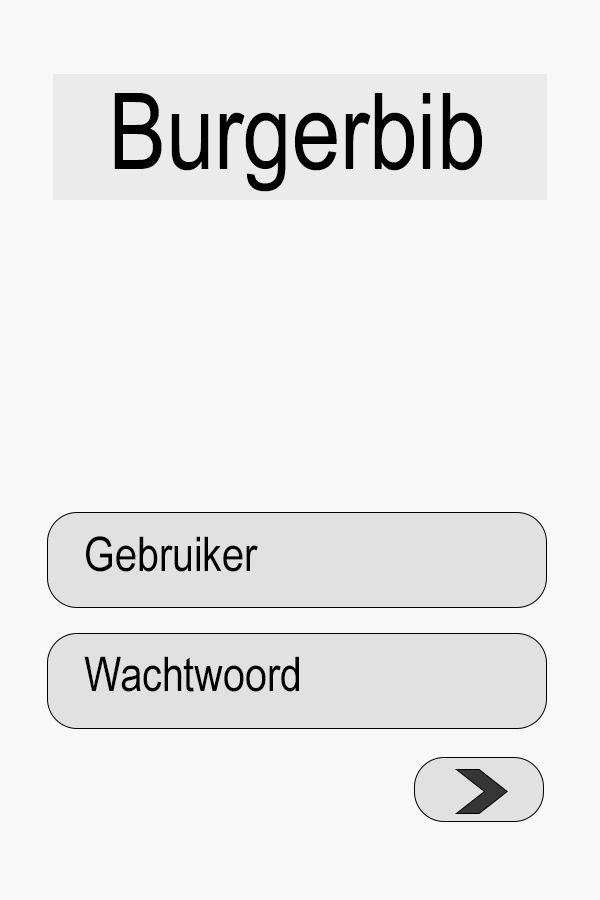
<style>
.page{position:relative;width:600px;height:900px;background:#f8f8f8}
.page>*{position:absolute;margin:0}
.t1{font:106px "ArialNarrow";color:#000000}
.t2{font:48px "ArialNarrow";color:#000000}
</style>
<div class="page">
<p class="t1" style="left:114px;top:93px;width:368px;height:99px">Burgerbib</p>
<p class="t2" style="left:86px;top:536px;width:172px;height:36px">Gebruiker</p>
<p class="t2" style="left:84px;top:656px;width:215px;height:36px">Wachtwoord</p>
</div>
